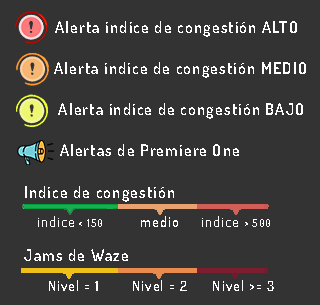
<style>
.page{position:relative;width:320px;height:305px;background:#333333}
.page>*{position:absolute;margin:0}
.t1{font:16px "Dosis-SemiBold";letter-spacing:0.075em;color:#ffffff}
.t2{font:14px "Dosis-SemiBold";letter-spacing:0.075em;color:#ffffff}
.t3{font:11px "Dosis-SemiBold";letter-spacing:0.075em;color:#ffffff}
</style>
<div class="page">
<p class="t1" style="left:55px;top:21px;width:242px;height:16px">Alerta indice de congestión ALTO</p>
<p class="t1" style="left:54px;top:62px;width:252px;height:16px">Alerta indice de congestión MEDIO</p>
<p class="t1" style="left:58px;top:103px;width:245px;height:16px">Alerta indice de congestión BAJO</p>
<p class="t1" style="left:60px;top:144px;width:179px;height:12px">Alertas de Premiere One</p>
<p class="t1" style="left:25px;top:186px;width:149px;height:16px">Indice de congestión</p>
<p class="t2" style="left:38px;top:216px;width:64px;height:11px">indice<span class="t3"> &lt; 150</span></p>
<p class="t2" style="left:141px;top:216px;width:37px;height:11px">medio</p>
<p class="t2" style="left:202px;top:216px;width:68px;height:11px">indice <span class="t3">&gt; 500</span></p>
<p class="t1" style="left:24px;top:249px;width:104px;height:12px">Jams de Waze</p>
<p class="t2" style="left:49px;top:280px;width:49px;height:11px">Nivel = 1</p>
<p class="t2" style="left:133px;top:280px;width:54px;height:11px">Nivel = 2</p>
<p class="t2" style="left:213px;top:280px;width:61px;height:11px">Nivel &gt;= 3</p>
</div>
